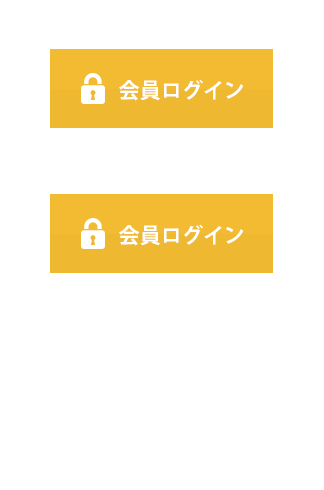
<style>
.page{position:relative;width:324px;height:490px;background:#ffffff}
.page>*{position:absolute;margin:0}
.t1{font:21px "KozGoPr6N-Bold";color:#ffffff;text-transform:uppercase}
</style>
<div class="page">
<p class="t1" style="left:119px;top:79px;width:125px;height:22px">会員ログイン</p>
<p class="t1" style="left:119px;top:224px;width:125px;height:22px">会員ログイン</p>
</div>
